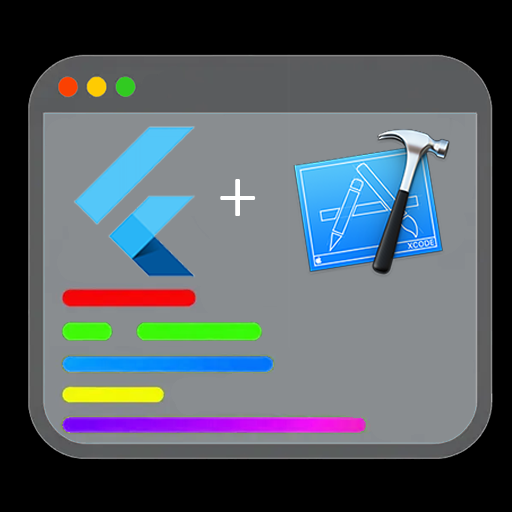
<style>
.page{position:relative;width:512px;height:512px;background:#898d90}
.page>*{position:absolute;margin:0}
.t1{font:82.8px "Calibri-Light";letter-spacing:-0.025em;color:#ffffff}
</style>
<div class="page">
<p class="t1" style="left:220px;top:179px;width:36px;height:37px">+</p>
</div>
